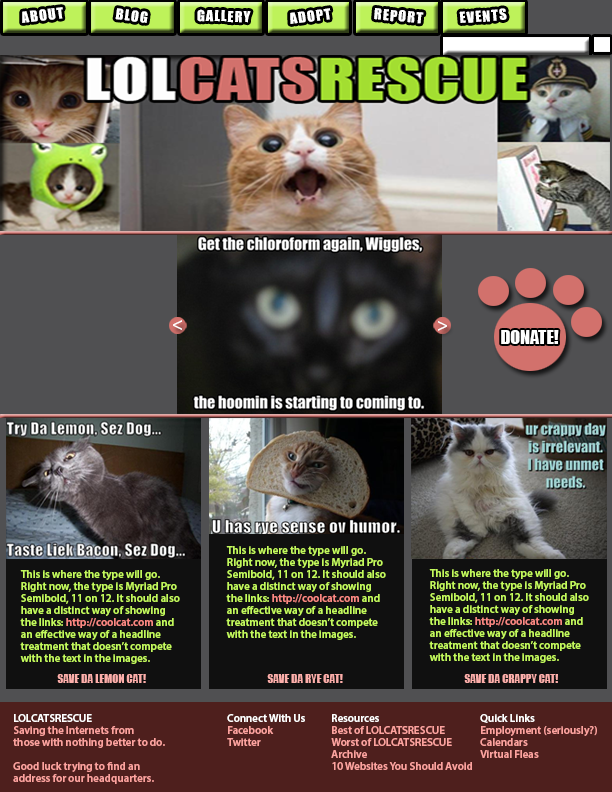
<style>
.page{position:relative;width:612px;height:792px}
.page>*{position:absolute;margin:0}
.t1{font:14px "Impact";letter-spacing:0.075em;color:#ffffff;scale:1.03 1}
.t2{font:14px "Impact";letter-spacing:0.075em;color:#fdfdfd;scale:1.03 1}
.t3{font:19.1px "MyriadPro-Semibold";color:#ffffff}
.t4{font:18px "Impact";color:#ffffff}
.t5{font:11px/12px "MyriadPro-Semibold";color:#c3f95d}
.t6{font:11px/12px "MyriadPro-Semibold";color:#fb8882}
.t7{font:11px "Impact";letter-spacing:0.01em;color:#fcaeaa}
.t8{font:11px/12px "MyriadPro-Semibold";color:#fda29e}
.t9{font:11px/12px "MyriadPro-Semibold";color:#ffffff}
</style>
<div class="page">
<p class="t1" style="left:22px;top:7px;width:41px;height:16px;rotate:-7deg">ABOUT</p>
<p class="t1" style="left:115px;top:8px;width:33px;height:15px;rotate:7deg">BLOG</p>
<p class="t1" style="left:197px;top:9px;width:54px;height:14px;rotate:2deg">GALLERY</p>
<p class="t1" style="left:290px;top:8px;width:41px;height:16px;rotate:-8deg">ADOPT</p>
<p class="t2" style="left:374px;top:8px;width:50px;height:16px;rotate:5deg">REPORT</p>
<p class="t1" style="left:459px;top:8px;width:48px;height:15px;rotate:-4deg">EVENTS</p>
<p class="t3" style="left:173px;top:320px;width:10px;height:11px;rotate:180deg">&gt;</p>
<p class="t3" style="left:437px;top:320px;width:10px;height:11px">&gt;</p>
<p class="t4" style="left:501px;top:330px;width:58px;height:14px">DONATE!</p>
<p class="t5" style="left:226px;top:546px;width:160px;height:94px">This is where the type will go. Right now, the type is Myriad Pro Semibold, 11 on 12. It should also have a distinct way of showing the links: <span class="t6">http://coolcat.com</span> and an effective way of a headline treatment that doesn’t compete with the text in the images.</p>
<p class="t5" style="left:429px;top:569px;width:160px;height:94px">This is where the type will go. Right now, the type is Myriad Pro Semibold, 11 on 12. It should also have a distinct way of showing the links: <span class="t6">http://coolcat.com</span> and an effective way of a headline treatment that doesn’t compete with the text in the images.</p>
<p class="t5" style="left:20px;top:570px;width:160px;height:94px">This is where the type will go. Right now, the type is Myriad Pro Semibold, 11 on 12. It should also have a distinct way of showing the links: <span class="t6">http://coolcat.com</span> and an effective way of a headline treatment that doesn’t compete with the text in the images.</p>
<p class="t7" style="left:57px;top:674px;width:89px;height:9px">SAVE DA LEMON CAT!</p>
<p class="t7" style="left:267px;top:674px;width:76px;height:9px">SAVE DA RYE CAT!</p>
<p class="t7" style="left:464px;top:674px;width:94px;height:9px">SAVE DA CRAPPY CAT!</p>
<p class="t8" style="left:13px;top:714px;width:152px;height:70px"><span class="t9">LOLCATSRESCUE<br></span>Saving the Internets from <br>those with nothing better to do.<br><br>Good luck trying to find an <br>address for our headquarters.</p>
<p class="t8" style="left:227px;top:714px;width:78px;height:32px"><span class="t9">Connect With Us<br></span>Facebook<br>Twitter</p>
<p class="t8" style="left:331px;top:714px;width:141px;height:56px"><span class="t9">Resources<br></span>Best of LOLCATSRESCUE<br>Worst of LOLCATSRESCUE<br>Archive<br>10 Websites You Should Avoid</p>
<p class="t8" style="left:480px;top:714px;width:117px;height:44px"><span class="t9">Quick Links<br></span>Employment (seriously?)<br>Calendars<br>Virtual Fleas</p>
</div>
